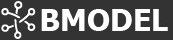
<style>
.page{position:relative;width:173px;height:40px;background:#333333}
.page>*{position:absolute;margin:0}
.t1{font:30px "Tahoma-Bold";color:#ffffff}
</style>
<div class="page">
<p class="t1" style="left:41px;top:9px;width:127px;height:22px">BMODEL</p>
</div>
